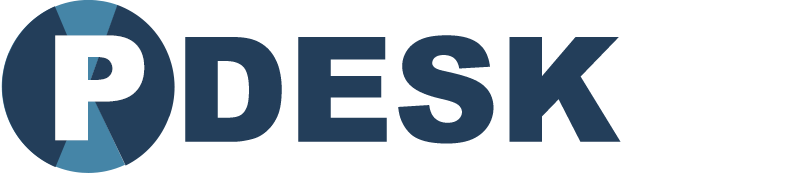
<style>
.page{position:relative;width:800px;height:173px;background:#ffffff}
.page>*{position:absolute;margin:0}
.t1{font:146px "Arial-Black";color:#ffffff}
.t2{font:146px "Arial-Black";color:#233e5a}
</style>
<div class="page">
<p class="t1" style="left:55px;top:35px;width:90px;height:106px">P</p>
<p class="t2" style="left:185px;top:35px;width:436px;height:109px">DESK</p>
</div>
